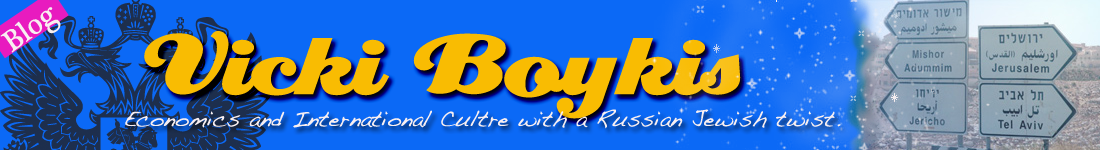
<style>
.page{position:relative;width:1100px;height:150px;background:#0b69f6}
.page>*{position:absolute;margin:0}
.t1{font:29.8px "PlantagenetCherokee";color:#f8eff1;scale:0.96 1}
.t2{font:102px "Creampuff";color:#f9bc02}
.t3{font:22px "Handwriting-Dakota";color:#f8eff1}
</style>
<div class="page">
<p class="t1" style="left:0px;top:7px;width:61px;height:46px;rotate:-36deg">Blog</p>
<p class="t2" style="left:144px;top:31px;width:597px;height:88px">Vicki Boykis</p>
<p class="t3" style="left:125px;top:109px;width:716px;height:20px">Economics and International Cultre with a Russian Jewish twist.</p>
</div>
